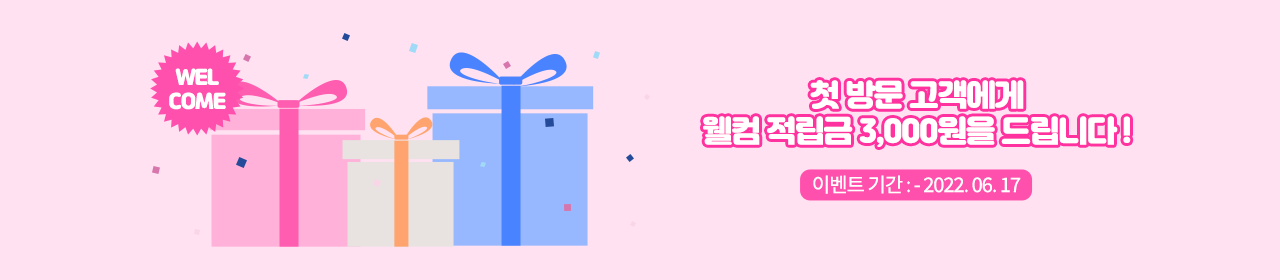
<style>
.page{position:relative;width:1280px;height:280px;background:#ffe1f1}
.page>*{position:absolute;margin:0}
.t1{font:20px "JalnanOTF";letter-spacing:-0.05em;color:#ffffff}
.t2{font:30px "JalnanOTF";letter-spacing:-0.05em;color:#ffffff}
.t3{font:20px "NotoSansKR-Regular";letter-spacing:-0.05em;color:#ffffff}
</style>
<div class="page">
<p class="t1" style="left:169px;top:68px;width:57px;height:42px;text-align:center">WEL<br>COME</p>
<p class="t2" style="left:703px;top:80px;width:428px;height:67px;text-align:center">첫 방문 고객에게<br>웰컴 적립금 3,000원을 드립니다 !</p>
<p class="t3" style="left:813px;top:175px;width:208px;height:19px">이벤트 기간 : - 2022. 06. 17</p>
</div>
